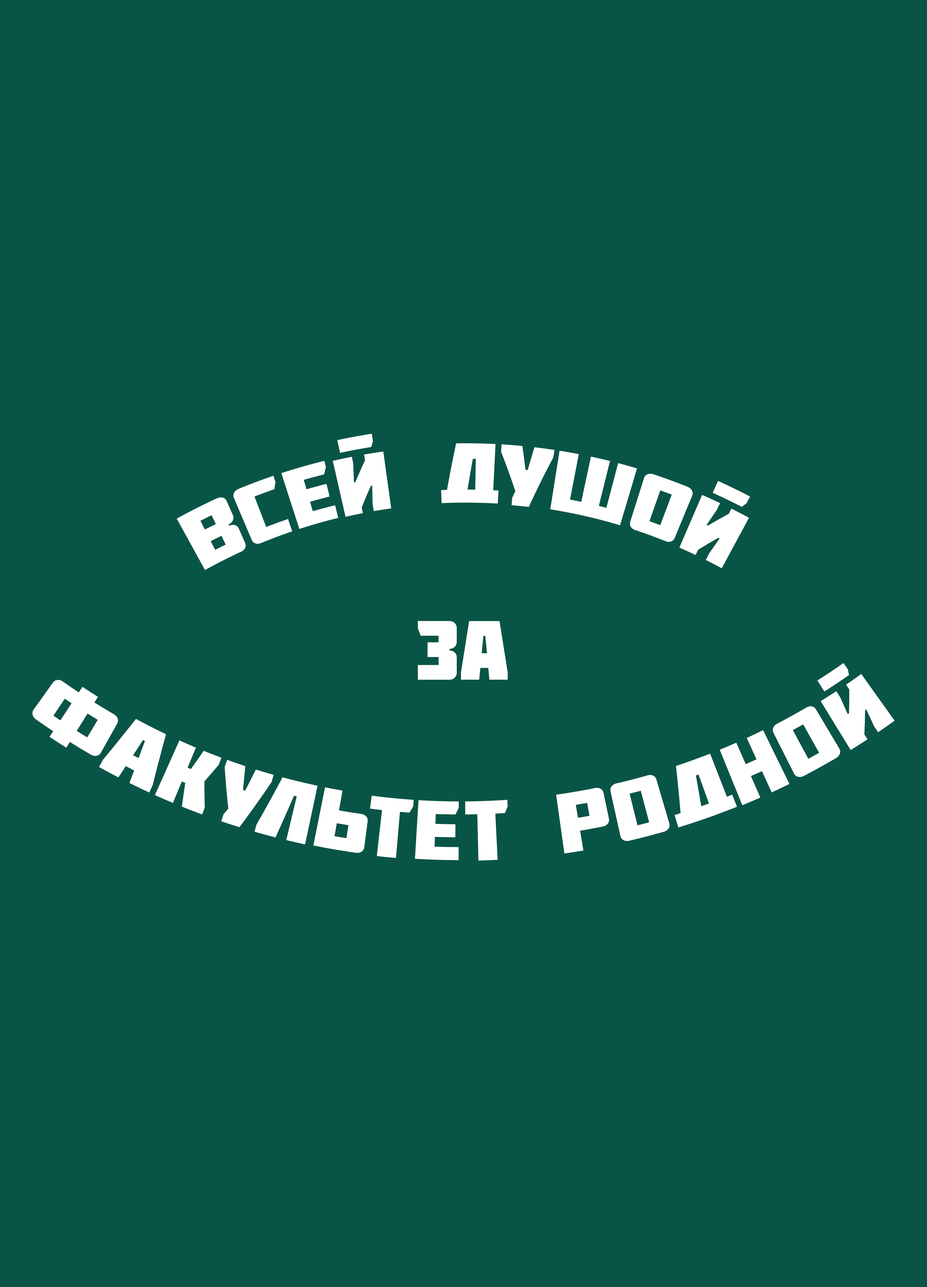
<style>
.page{position:relative;width:927px;height:1287px;background:#085547}
.page>*{position:absolute;margin:0}
.t1{font:83.6px "Molot";color:#ffffff}
.t2{font:83.6px/418.7px "Molot";color:#ffffff}
</style>
<div class="page">
<p class="t1" style="left:177px;top:434px;width:573px;height:136px;rotate:2deg">Всей душой</p>
<p class="t1" style="left:418px;top:621px;width:90px;height:59px">за</p>
<p class="t2" style="left:32px;top:663px;width:862px;height:197px;text-align:center">факультет родной</p>
</div>
